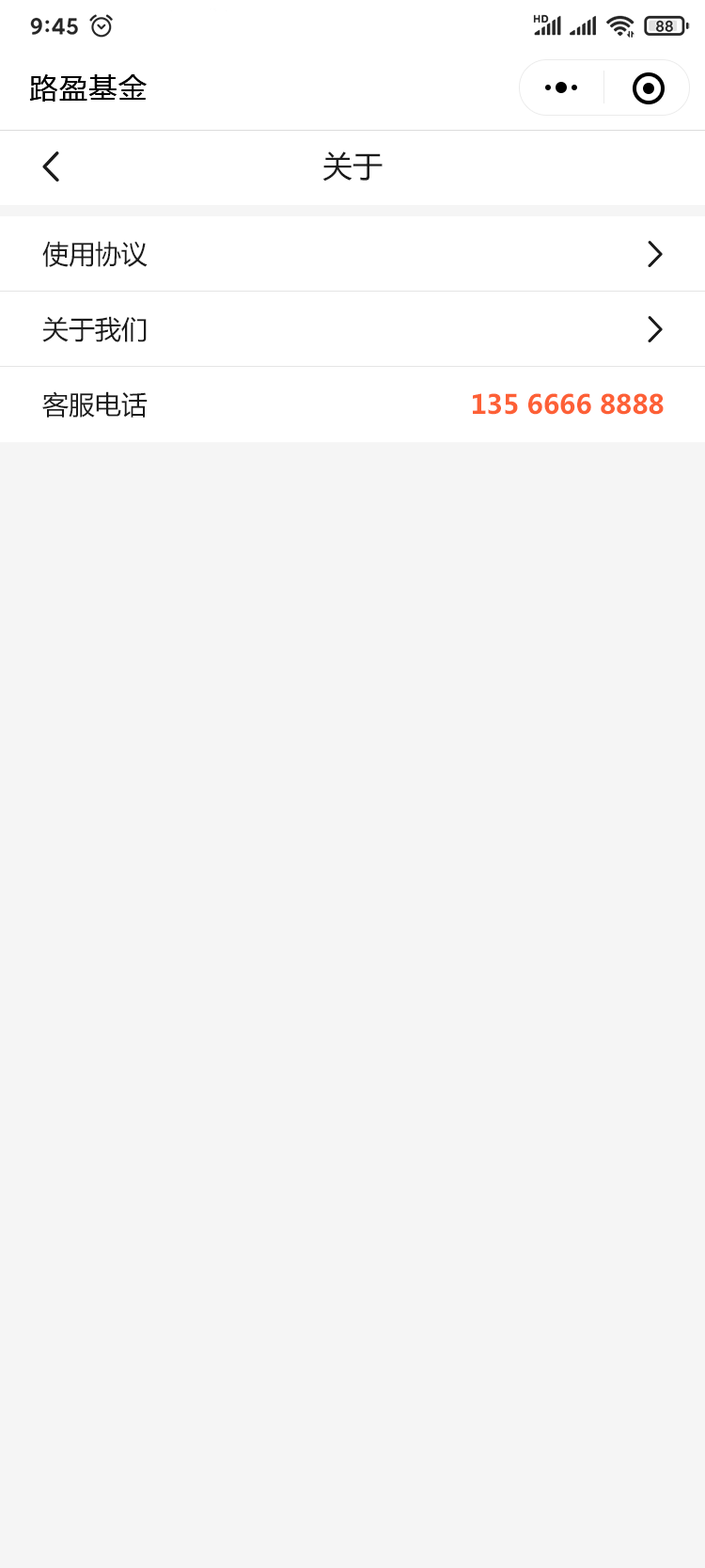
<style>
.page{position:relative;width:705px;height:1568px;background:#f5f5f5}
.page>*{position:absolute;margin:0}
.t1{font:28.2px "MicrosoftYaHei";letter-spacing:0.05em;color:#000000}
.t2{font:30.1px "MicrosoftYaHei";color:#1b1b1b}
.t3{font:26.3px/75.2px "MicrosoftYaHei";color:#1b1b1b}
.t4{font:26.3px "MicrosoftYaHei-Bold";color:#fd6036}
.t5{font:26.3px "MicrosoftYaHei";color:#959595}
</style>
<div class="page">
<p class="t1" style="left:29px;top:74px;width:118px;height:28px">路盈基金</p>
<p class="t2" style="left:323px;top:151px;width:60px;height:31px">关于</p>
<p class="t3" style="left:42px;top:241px;width:106px;height:177px">使用协议<br>关于我们<br>客服电话</p>
<p class="t4" style="left:473px;top:393px;width:191px;height:22px"><span class="t5"><br><br></span>135 6666 8888</p>
</div>
